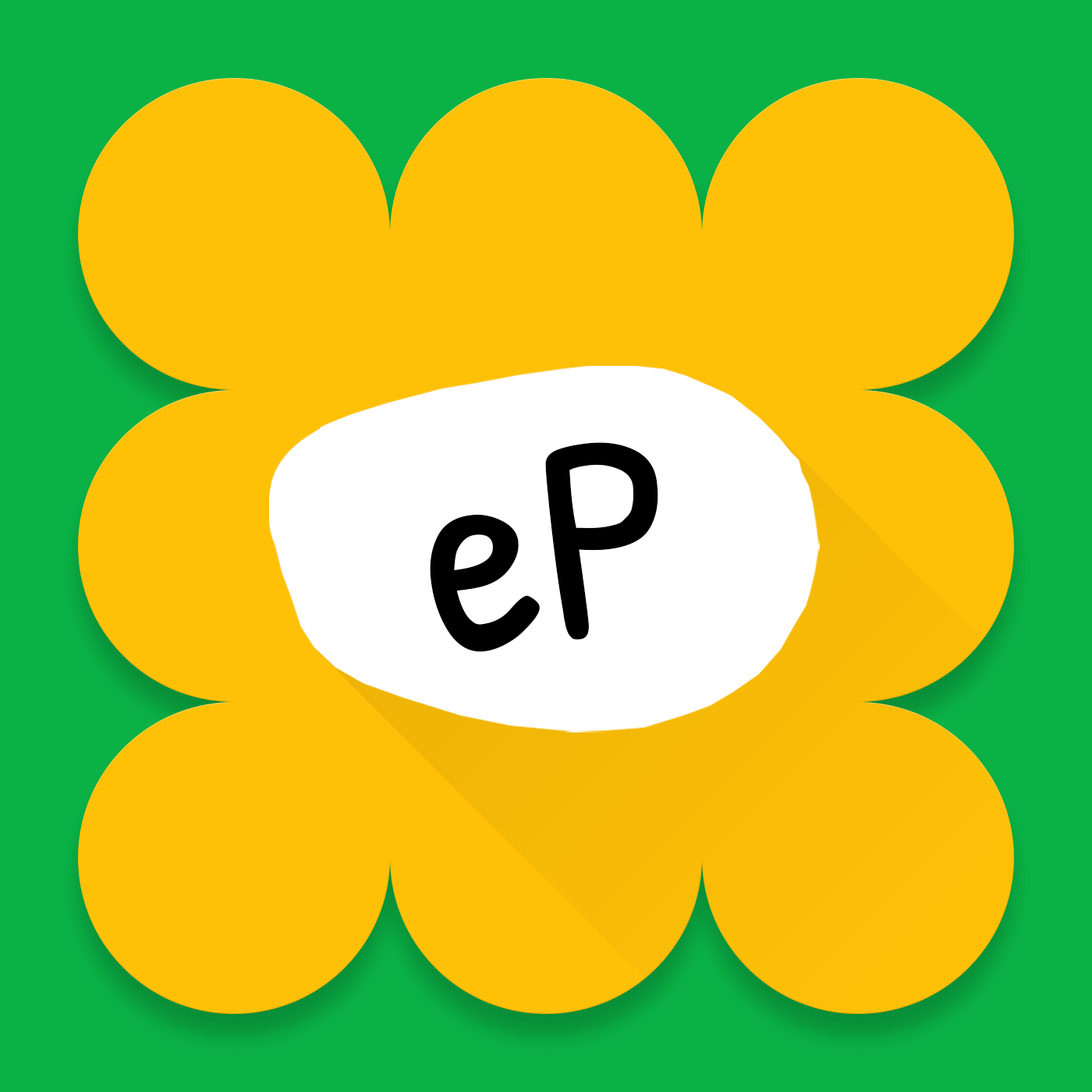
<style>
.page{position:relative;width:1092px;height:1092px;background:#ffc107}
.page>*{position:absolute;margin:0}
.t1{font:293.3px "PatrickHand-Regular";color:#000000}
</style>
<div class="page">
<p class="t1" style="left:430px;top:442px;width:228px;height:210px;rotate:-7deg">eP</p>
</div>
